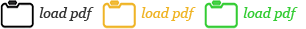
<style>
.page{position:relative;width:306px;height:29px;background:#ffffff}
.page>*{position:absolute;margin:0}
.t1{font:14px "Georgia-Italic";color:#343434}
.t2{font:14px "Georgia-Italic";color:#efb426}
.t3{font:14px "Georgia-Italic";color:#33cc33}
</style>
<div class="page">
<p class="t1" style="left:39px;top:7px;width:55px;height:14px">load pdf</p>
<p class="t2" style="left:141px;top:7px;width:55px;height:14px">load pdf</p>
<p class="t3" style="left:243px;top:7px;width:55px;height:14px">load pdf</p>
</div>
